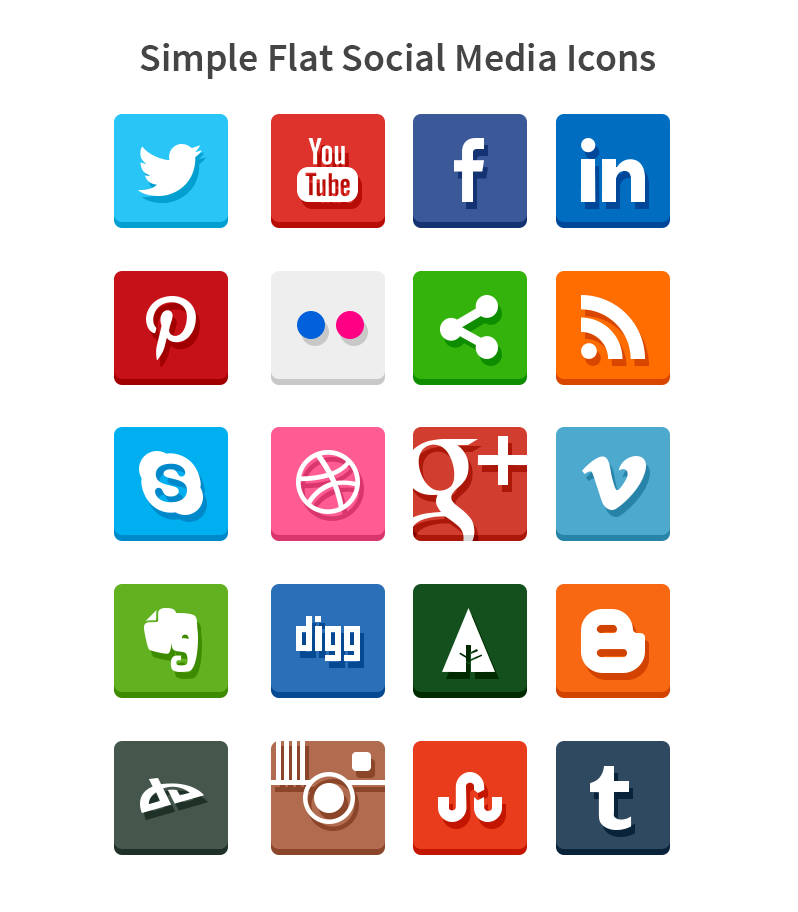
<style>
.page{position:relative;width:798px;height:912px;background:#ffffff}
.page>*{position:absolute;margin:0}
.t1{font:40px "SourceSansPro-Semibold";color:#464545}
</style>
<div class="page">
<p class="t1" style="left:140px;top:43px;width:515px;height:36px">Simple Flat Social Media Icons</p>
</div>
